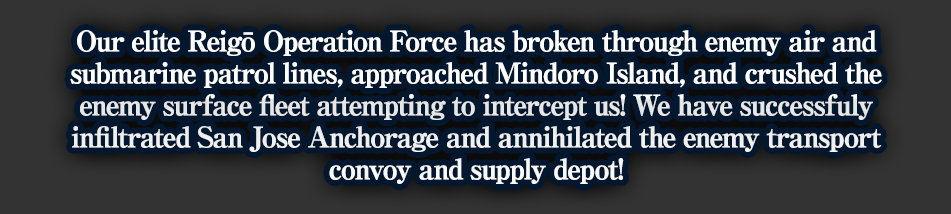
<style>
.page{position:relative;width:951px;height:214px;background:#03172f}
.page>*{position:absolute;margin:0}
.t1{font:28px/32px "RyuminPro-ExBold";letter-spacing:-0.08em;color:#ffffff;font-weight:bold}
</style>
<div class="page">
<p class="t1" style="left:70px;top:30px;width:812px;height:154px;text-align:center">Our elite Reigō Operation Force has broken through enemy air and<br>submarine patrol lines, approached Mindoro Island, and crushed the<br>enemy surface fleet attempting to intercept us! We have successfuly<br>infiltrated San Jose Anchorage and annihilated the enemy transport<br>convoy and supply depot!</p>
</div>
